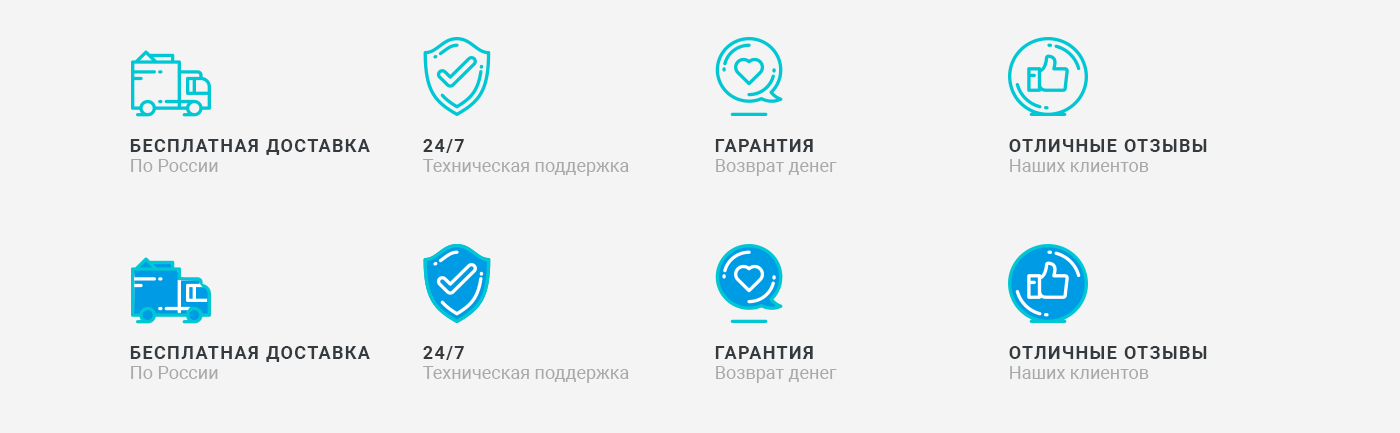
<style>
.page{position:relative;width:1400px;height:433px;background:#f4f4f4}
.page>*{position:absolute;margin:0}
.t1{font:18px "Roboto-Bold";letter-spacing:0.075em;color:#353a3e;text-transform:uppercase}
.t2{font:18px "Roboto-Regular";color:#a9a9a9}
</style>
<div class="page">
<p class="t1" style="left:130px;top:139px;width:240px;height:16px">Бесплатная доставка</p>
<p class="t1" style="left:423px;top:139px;width:41px;height:14px">24/7</p>
<p class="t1" style="left:715px;top:139px;width:98px;height:13px">Гарантия</p>
<p class="t1" style="left:1009px;top:139px;width:198px;height:13px">Отличные отзывы</p>
<p class="t2" style="left:131px;top:159px;width:87px;height:13px">По России</p>
<p class="t2" style="left:423px;top:159px;width:206px;height:17px">Техническая поддержка</p>
<p class="t2" style="left:716px;top:159px;width:121px;height:17px">Возврат денег</p>
<p class="t2" style="left:1010px;top:159px;width:139px;height:13px">Наших клиентов</p>
<p class="t1" style="left:130px;top:346px;width:240px;height:16px">Бесплатная доставка</p>
<p class="t1" style="left:423px;top:346px;width:41px;height:14px">24/7</p>
<p class="t1" style="left:715px;top:346px;width:98px;height:13px">Гарантия</p>
<p class="t1" style="left:1009px;top:346px;width:198px;height:13px">Отличные отзывы</p>
<p class="t2" style="left:131px;top:366px;width:87px;height:13px">По России</p>
<p class="t2" style="left:423px;top:366px;width:206px;height:17px">Техническая поддержка</p>
<p class="t2" style="left:716px;top:366px;width:121px;height:17px">Возврат денег</p>
<p class="t2" style="left:1010px;top:366px;width:139px;height:13px">Наших клиентов</p>
</div>
